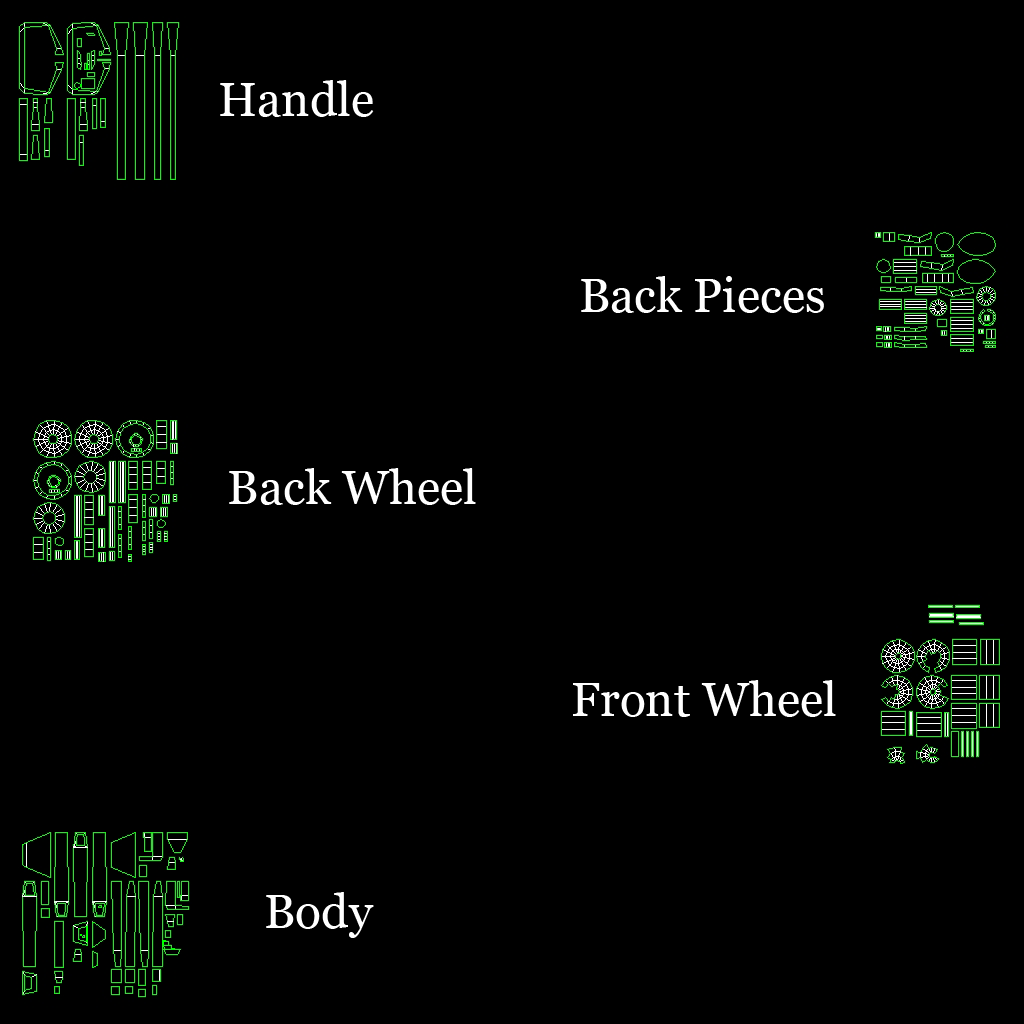
<style>
.page{position:relative;width:1024px;height:1024px;background:#000000}
.page>*{position:absolute;margin:0}
.t1{font:48px "Georgia";color:#ffffff}
</style>
<div class="page">
<p class="t1" style="left:220px;top:80px;width:154px;height:37px">Handle</p>
<p class="t1" style="left:581px;top:276px;width:243px;height:37px">Back Pieces</p>
<p class="t1" style="left:229px;top:468px;width:247px;height:37px">Back Wheel</p>
<p class="t1" style="left:573px;top:680px;width:263px;height:37px">Front Wheel</p>
<p class="t1" style="left:266px;top:892px;width:108px;height:46px">Body</p>
</div>
